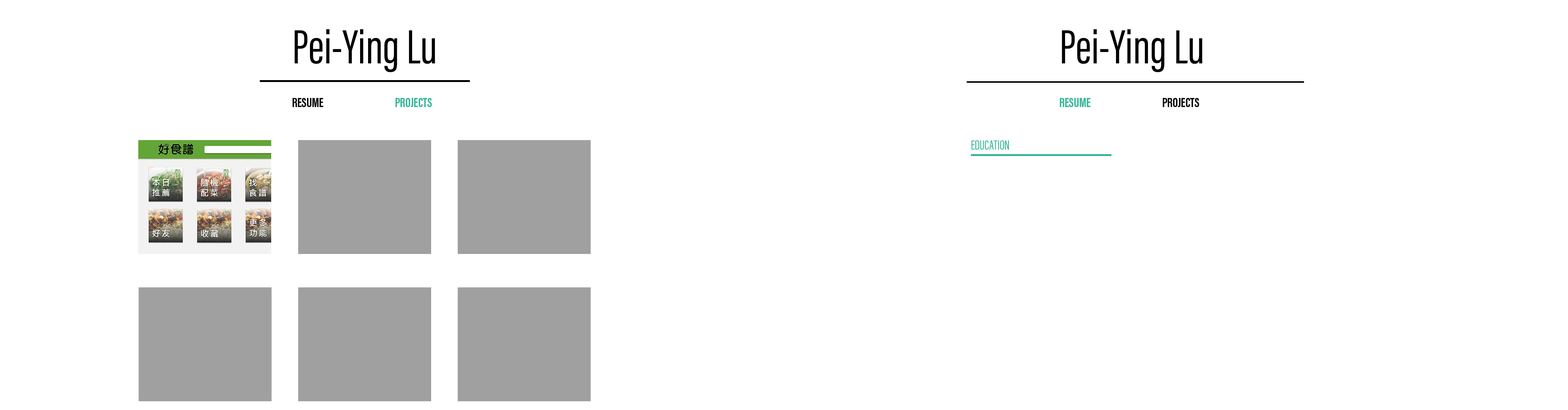
<style>
.page{position:relative;width:1568px;height:410px;background:#ffffff}
.page>*{position:absolute;margin:0}
.t1{font:49.4px "AcuminProExtraCond-Regular";color:#010101}
.t2{font:13.7px "AcuminProExtraCond-Bold";color:#000000;text-transform:uppercase}
.t3{font:13.7px "AcuminProExtraCond-Bold";color:#33b599;text-transform:uppercase}
.t4{font:13.7px "AcuminProExtraCond-Regular";color:#33b599;text-transform:uppercase}
</style>
<div class="page">
<p class="t1" style="left:294px;top:29px;width:141px;height:43px">Pei-Ying Lu</p>
<p class="t1" style="left:1062px;top:29px;width:141px;height:43px">Pei-Ying Lu</p>
<p class="t2" style="left:292px;top:98px;width:31px;height:9px">Resume</p>
<p class="t3" style="left:395px;top:98px;width:37px;height:9px">Projects</p>
<p class="t3" style="left:1060px;top:98px;width:31px;height:9px">Resume</p>
<p class="t2" style="left:1163px;top:98px;width:36px;height:9px">Projects</p>
<p class="t4" style="left:971px;top:141px;width:38px;height:9px">Education</p>
</div>
